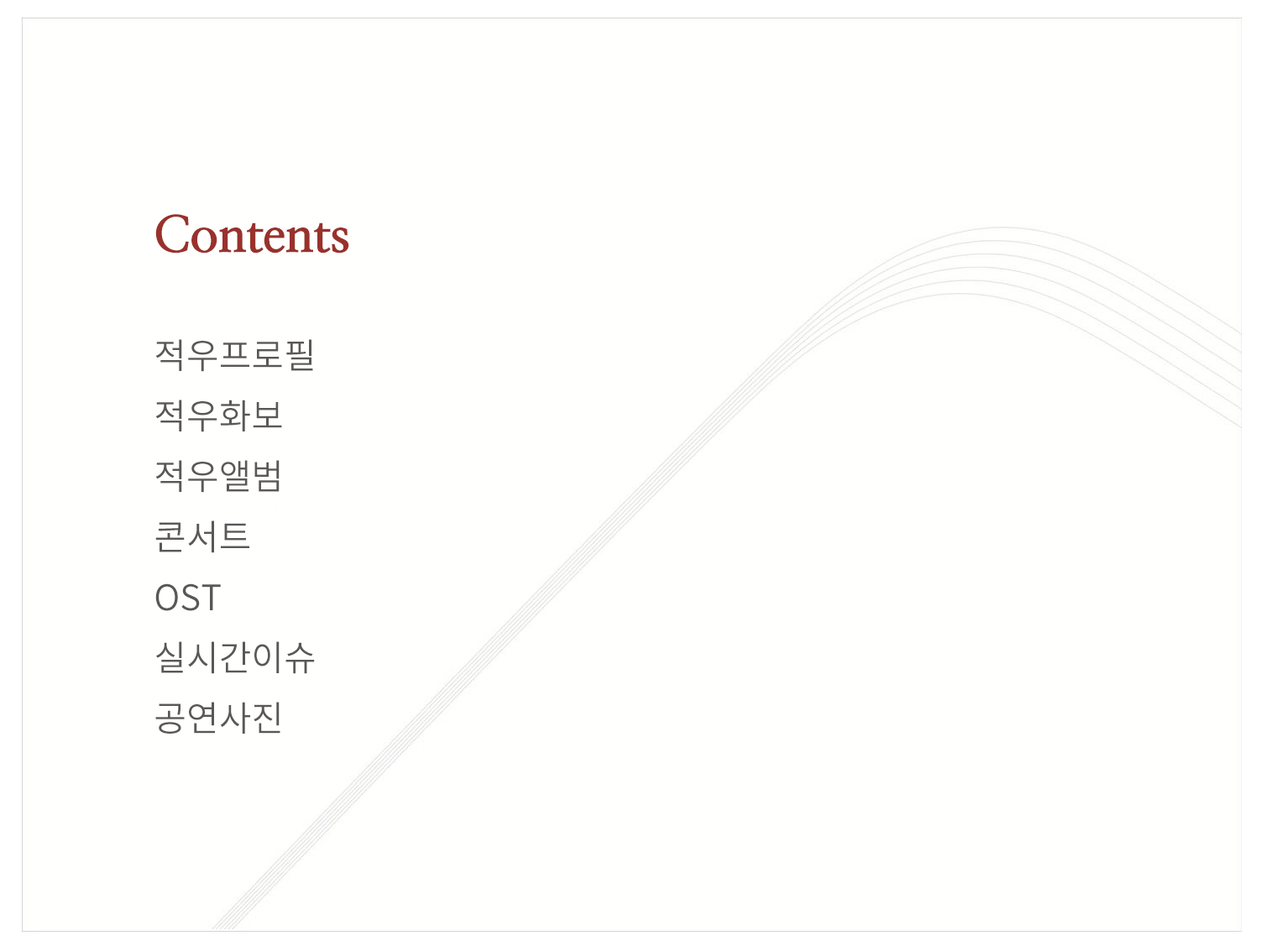
<style>
.page{position:relative;width:1261px;height:946px;background:#fffffd}
.page>*{position:absolute;margin:0}
.t1{font:50.4px "NanumMyeongjoExtraBold";color:#99312c}
.t2{font:35.3px/60.4px "NotoSansCJKkr-DemiLight";color:#595757}
</style>
<div class="page">
<p class="t1" style="left:155px;top:214px;width:194px;height:39px">Contents</p>
<p class="t2" style="left:155px;top:339px;width:160px;height:395px">적우프로필<br>적우화보<br>적우앨범<br>콘서트<br>OST<br>실시간이슈<br>공연사진</p>
</div>
